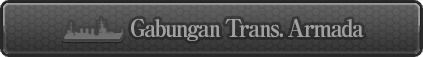
<style>
.page{position:relative;width:423px;height:57px}
.page>*{position:absolute;margin:0}
.t1{font:24px "RyuminPro-ExBold";letter-spacing:-0.08em;color:#a1a1a1;scale:0.9 1}
</style>
<div class="page">
<p class="t1" style="left:131px;top:19px;width:233px;height:22px">Gabungan Trans. Armada</p>
</div>
